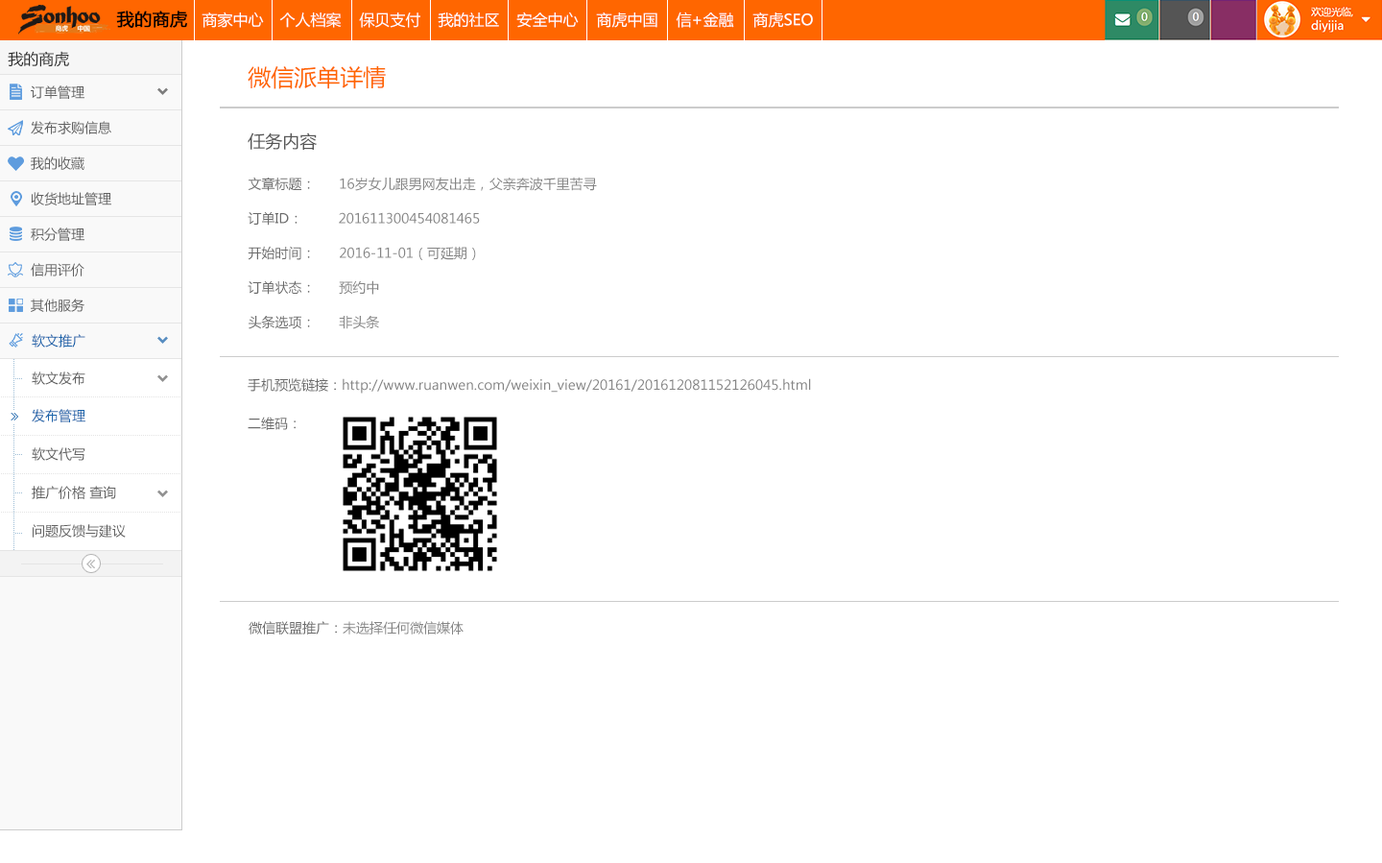
<style>
.page{position:relative;width:1382px;height:863px;background:#ffffff}
.page>*{position:absolute;margin:0}
.t1{font:17.3px "MicrosoftYaHei";color:#000000;font-weight:bold}
.t2{font:15.4px "MicrosoftYaHei";color:#ffffff}
.t3{font:15.4px "MicrosoftYaHei";color:#2d2d2d}
.t4{font:23px "MicrosoftYaHei";color:#ff6600}
.t5{font:13.4px "MicrosoftYaHei";color:#616161}
.t6{font:17.3px "MicrosoftYaHei";color:#575757}
.t7{font:13.4px/34.6px "MicrosoftYaHei";color:#858585}
.t8{font:13.4px/34.6px "MicrosoftYaHei";color:#6b6b6b}
.t9{font:13.4px "MicrosoftYaHei";color:#1963aa}
.t10{font:3.8px "SimSun";color:#9dbdd6}
.t11{font:13.4px/38.4px "MicrosoftYaHei";color:#858585}
.t12{font:13.4px/38.4px "MicrosoftYaHei";color:#6b6b6b}
.t13{font:3.8px "SimSun";color:#e4e4e4}
.t14{font:13.4px "MicrosoftYaHei";color:#858585}
.t15{font:13.4px "MicrosoftYaHei";color:#6b6b6b}
</style>
<div class="page">
<p class="t1" style="left:116px;top:11px;width:71px;height:17px">我的商虎</p>
<p class="t2" style="left:202px;top:12px;width:62px;height:16px">商家中心</p>
<p class="t2" style="left:279px;top:12px;width:63px;height:16px">个人档案</p>
<p class="t2" style="left:359px;top:12px;width:61px;height:16px">保贝支付</p>
<p class="t2" style="left:438px;top:12px;width:61px;height:16px">我的社区</p>
<p class="t2" style="left:516px;top:12px;width:63px;height:16px">安全中心</p>
<p class="t2" style="left:596px;top:12px;width:61px;height:16px">商虎中国</p>
<p class="t2" style="left:676px;top:12px;width:58px;height:16px">信+金融</p>
<p class="t2" style="left:752px;top:12px;width:61px;height:16px">商虎SEO</p>
<p class="t3" style="left:8px;top:51px;width:61px;height:16px">我的商虎</p>
<p class="t4" style="left:248px;top:66px;width:138px;height:23px">微信派单详情</p>
<p class="t5" style="left:31px;top:85px;width:53px;height:14px">订单管理</p>
<p class="t5" style="left:31px;top:121px;width:80px;height:13px">发布求购信息</p>
<p class="t6" style="left:248px;top:132px;width:69px;height:18px">任务内容</p>
<p class="t5" style="left:31px;top:156px;width:53px;height:14px">我的收藏</p>
<p class="t7" style="left:248px;top:177px;width:349px;height:152px"><span class="t8">文章标题：</span>      16岁女儿跟男网友出走，父亲奔波千里苦寻<br><span class="t8">订单ID：</span>         201611300454081465<br><span class="t8">开始时间：</span>      2016-11-01（可延期）<br><span class="t8">订单状态：</span>      预约中<br><span class="t8">头条选项：</span>      非头条</p>
<p class="t5" style="left:31px;top:192px;width:80px;height:13px">收货地址管理</p>
<p class="t5" style="left:31px;top:227px;width:53px;height:14px">积分管理</p>
<p class="t5" style="left:31px;top:263px;width:53px;height:13px">信用评价</p>
<p class="t5" style="left:31px;top:298px;width:53px;height:14px">其他服务</p>
<p class="t9" style="left:32px;top:334px;width:53px;height:13px">软文推广</p>
<p class="t10" style="left:13px;top:359px;width:1px;height:37px">....................</p>
<p class="t5" style="left:32px;top:371px;width:53px;height:14px">软文发布</p>
<p class="t10" style="left:15px;top:378px;width:7px;height:1px">....</p>
<p class="t11" style="left:248px;top:378px;width:563px;height:52px"><span class="t12">手机预览链接：</span>http://www.ruanwen.com/weixin_view/20161/201612081152126045.html<br><span class="t12">二维码：</span></p>
<p class="t13" style="left:1px;top:396px;width:179px;height:1px">..............................................................................................</p>
<p class="t10" style="left:13px;top:397px;width:1px;height:13px">.......</p>
<p class="t9" style="left:32px;top:409px;width:53px;height:13px">发布管理</p>
<p class="t10" style="left:13px;top:424px;width:1px;height:11px">......</p>
<p class="t13" style="left:1px;top:435px;width:179px;height:1px">..............................................................................................</p>
<p class="t10" style="left:13px;top:436px;width:1px;height:37px">....................</p>
<p class="t5" style="left:32px;top:447px;width:53px;height:14px">软文代写</p>
<p class="t10" style="left:15px;top:454px;width:7px;height:1px">....</p>
<p class="t13" style="left:1px;top:473px;width:179px;height:1px">..............................................................................................</p>
<p class="t10" style="left:13px;top:474px;width:1px;height:38px">....................</p>
<p class="t5" style="left:32px;top:486px;width:84px;height:13px">推广价格 查询</p>
<p class="t10" style="left:15px;top:492px;width:7px;height:1px">....</p>
<p class="t10" style="left:13px;top:503px;width:1px;height:47px">.........................</p>
<p class="t13" style="left:1px;top:512px;width:179px;height:1px">..............................................................................................</p>
<p class="t10" style="left:15px;top:533px;width:7px;height:1px">....</p>
<p class="t5" style="left:33px;top:524px;width:93px;height:13px">问题反馈与建议</p>
<p class="t14" style="left:249px;top:621px;width:215px;height:13px"><span class="t15">微信联盟推广：</span>未选择任何微信媒体</p>
</div>
